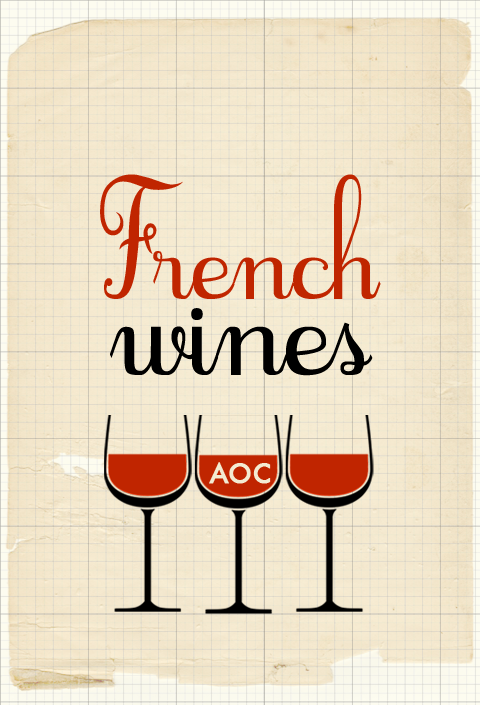
<style>
.page{position:relative;width:480px;height:705px}
.page>*{position:absolute;margin:0}
.t1{font:90.1px "Cursif-Regular";color:#c02500}
.t2{font:104.9px "Cursif-Regular";color:#000000}
.t3{font:26.5px "Futura-Medium";color:#f3ebd2;font-weight:bold}
</style>
<div class="page">
<p class="t1" style="left:100px;top:174px;width:281px;height:125px">French</p>
<p class="t2" style="left:110px;top:308px;width:263px;height:68px">wines</p>
<p class="t3" style="left:209px;top:462px;width:62px;height:22px">AOC</p>
</div>
